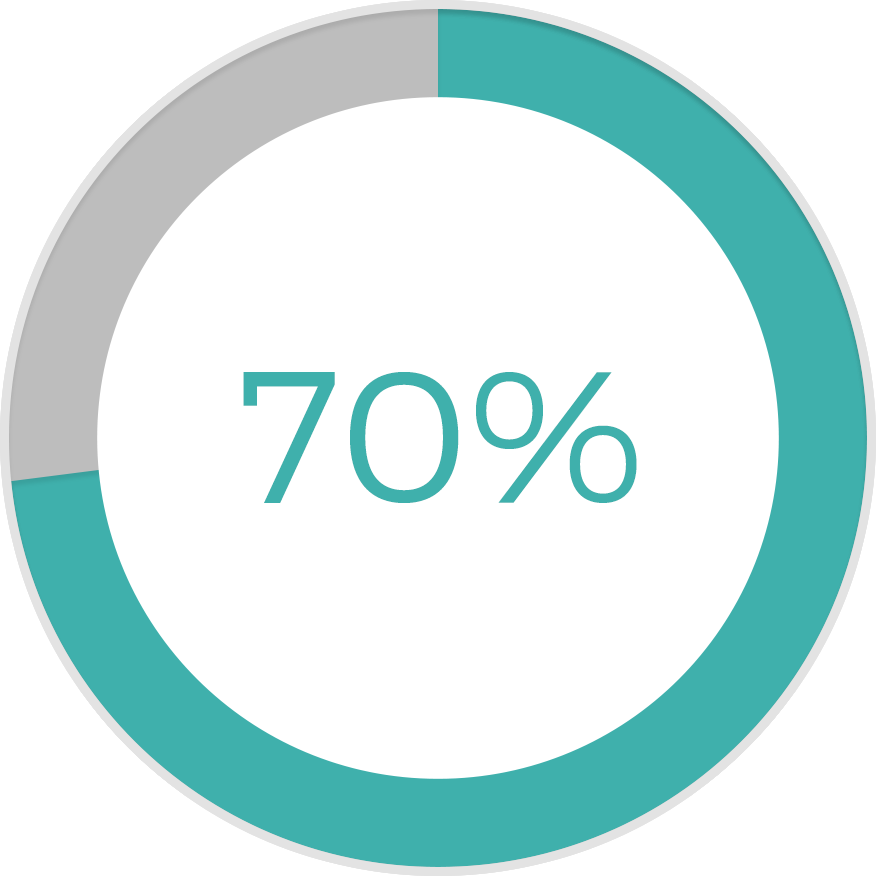
<style>
.page{position:relative;width:876px;height:876px;background:#ffffff}
.page>*{position:absolute;margin:0}
.t1{font:187.4px "Montserrat-Light"}
.t2{font:187.4px "Montserrat-Light";color:#3fb0ac}
</style>
<div class="page">
<p class="t1" style="left:239px;top:371px;width:404px;height:133px">80%</p>
<p class="t1" style="left:240px;top:371px;width:402px;height:133px">90%</p>
<p class="t2" style="left:243px;top:372px;width:394px;height:131px">70%</p>
</div>
